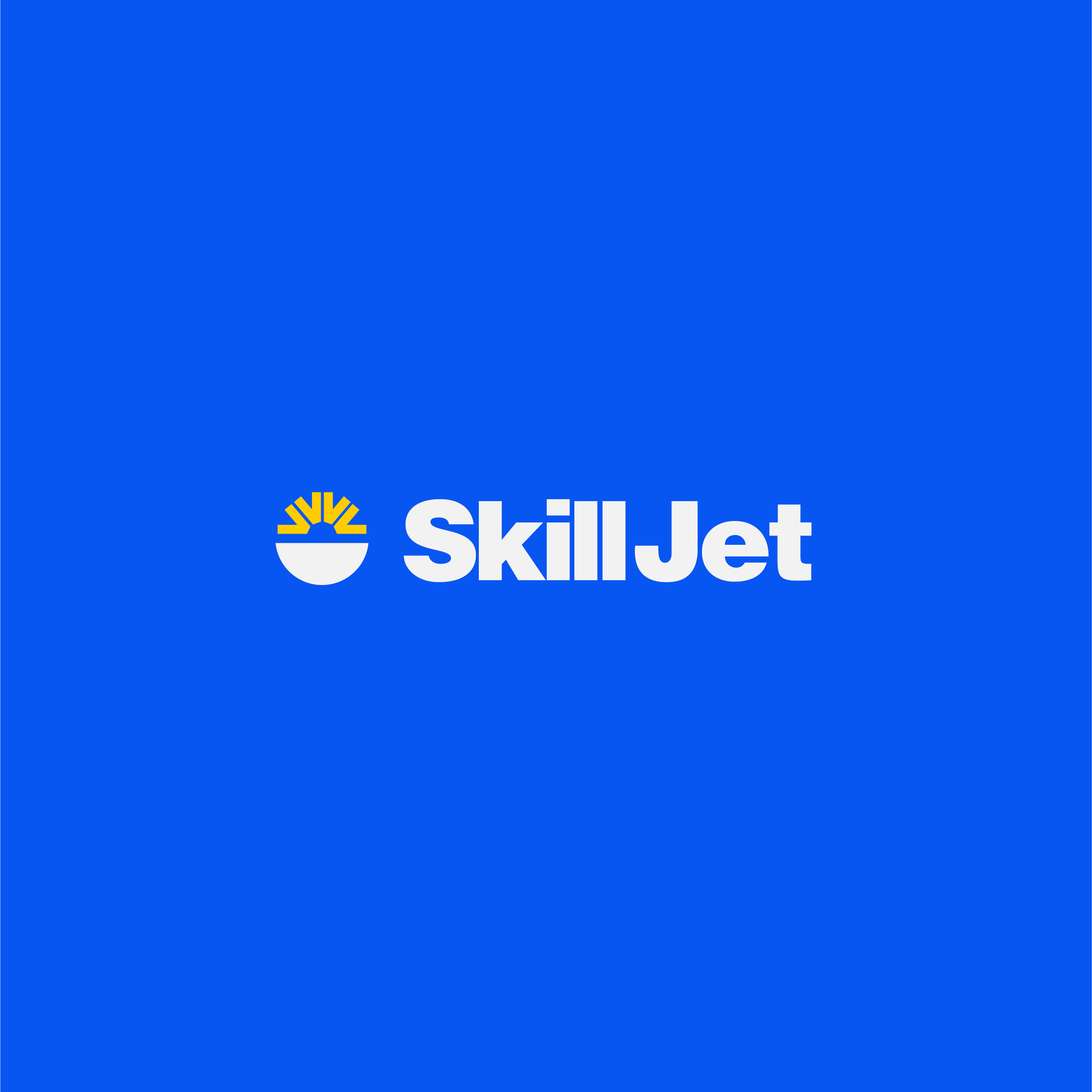
<style>
.page{position:relative;width:1092px;height:1092px;background:#0756f1}
.page>*{position:absolute;margin:0}
.t1{font:109.9px "Helvetica-Black";color:#f2f2f2}
</style>
<div class="page">
<p class="t1" style="left:404px;top:499px;width:408px;height:84px">SkillJet</p>
</div>
